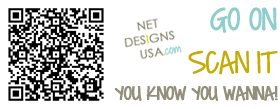
<style>
.page{position:relative;width:280px;height:109px;background:#ffffff}
.page>*{position:absolute;margin:0}
.t1{font:22px "CoveredByYourGrace";letter-spacing:-0.025em;color:#928f7b;font-weight:bold}
.t2{font:36px "CoveredByYourGrace";letter-spacing:-0.025em;color:#90cdce;font-weight:bold}
.t3{font:36px "CoveredByYourGrace";letter-spacing:-0.025em;color:#c4ac05}
</style>
<div class="page">
<p class="t1" style="left:114px;top:7px;width:164px;height:94px;text-align:right"><span class="t2">GO ON<br></span><span class="t3">SCAN IT<br></span>YOU KNOW YOU WANNA!</p>
</div>
